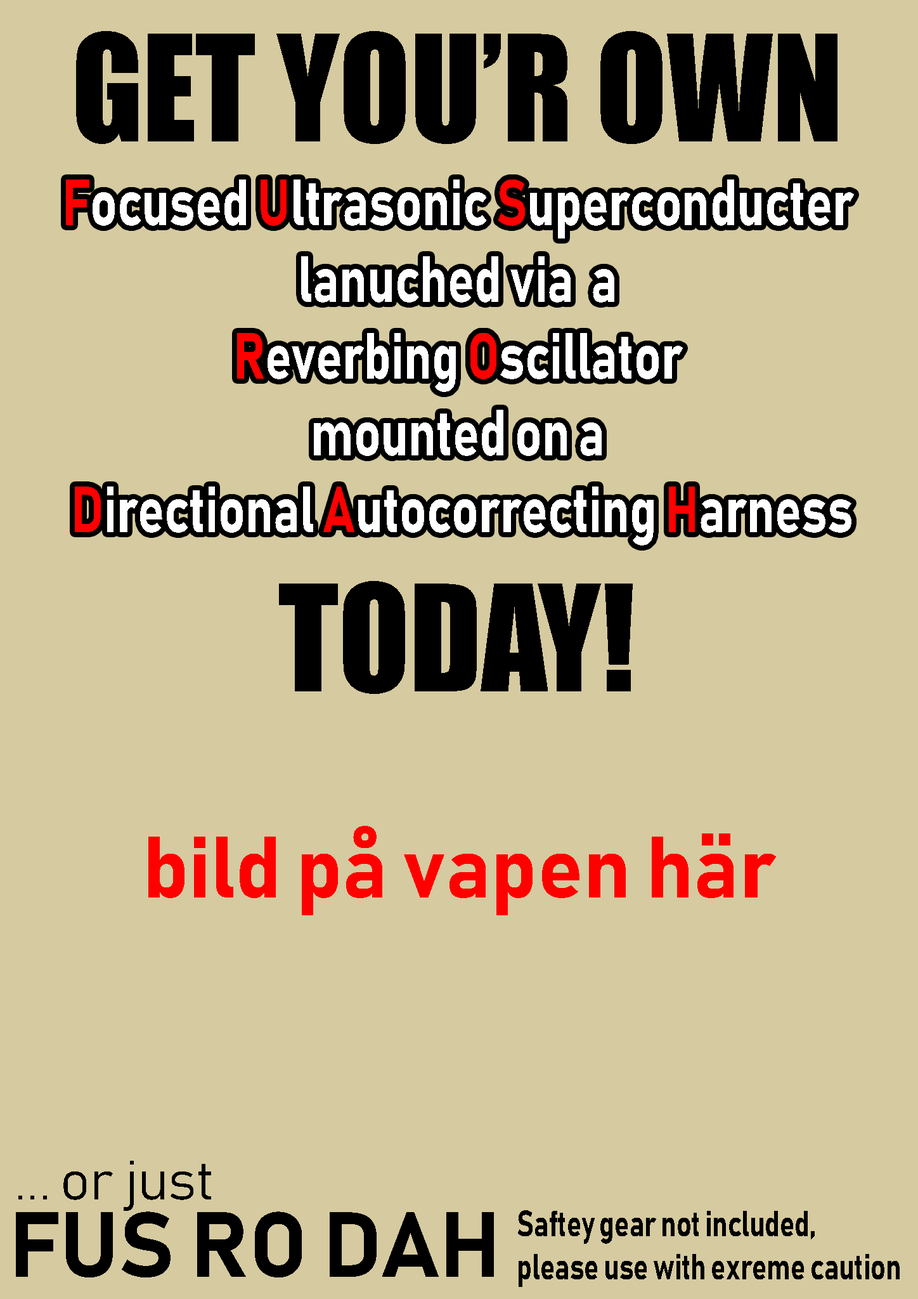
<style>
.page{position:relative;width:918px;height:1299px;background:#d5caa0}
.page>*{position:absolute;margin:0}
.t1{font:136.4px "Impact";color:#000000;scale:0.95 1}
.t2{font:63.9px "Bahnschrift-Bold";color:#ffffff;scale:0.78 1}
.t3{font:63.9px "Bahnschrift-Bold";color:#ff0000;scale:0.78 1}
.t4{font:85.5px "Bahnschrift-Bold";color:#fe0000}
.t5{font:54.8px "Bahnschrift-Bold";color:#000000}
.t6{font:90.5px "Bahnschrift-Bold";color:#000000}
.t7{font:35.9px "Bahnschrift-Bold";color:#000000;scale:0.77 1}
</style>
<div class="page">
<p class="t1" style="left:76px;top:31px;width:762px;height:113px">GET YOU’R OWN</p>
<p class="t2" style="left:66px;top:179px;width:788px;height:366px;text-align:center"><span class="t3">F</span>ocused <span class="t3">U</span>ltrasonic <span class="t3">S</span>uperconducter <br>lanuched via  a <br><span class="t3">R</span>everbing <span class="t3">O</span>scillator <br>mounted on a <br><span class="t3">D</span>irectional <span class="t3">A</span>utocorrecting <span class="t3">H</span>arness</p>
<p class="t1" style="left:279px;top:581px;width:354px;height:113px">TODAY!</p>
<p class="t4" style="left:148px;top:826px;width:628px;height:89px">bild på vapen här</p>
<p class="t5" style="left:18px;top:1160px;width:193px;height:51px">... or just</p>
<p class="t6" style="left:16px;top:1211px;width:478px;height:66px">FUS RO DAH</p>
<p class="t7" style="left:518px;top:1210px;width:382px;height:77px">Saftey gear not included,<br>please use with exreme caution</p>
</div>
